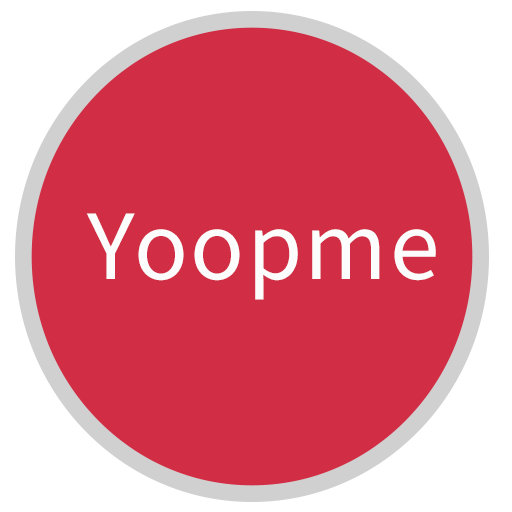
<style>
.page{position:relative;width:512px;height:512px;background:#d12d44}
.page>*{position:absolute;margin:0}
.t1{font:100px "SourceSansPro-Regular";letter-spacing:0.025em;color:#fcfcfc}
</style>
<div class="page">
<p class="t1" style="left:86px;top:213px;width:350px;height:87px">Yoopme</p>
</div>
